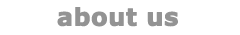
<style>
.page{position:relative;width:240px;height:35px;background:#ffffff}
.page>*{position:absolute;margin:0}
.t1{font:24px "Verdana-Bold";color:#939393;font-weight:bold}
</style>
<div class="page">
<p class="t1" style="left:57px;top:7px;width:121px;height:20px">about us</p>
</div>
